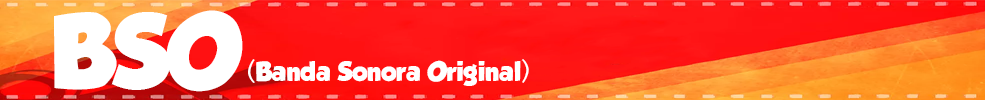
<style>
.page{position:relative;width:985px;height:100px}
.page>*{position:absolute;margin:0}
.t1{font:92px "GROBOLD";color:#ffffff}
.t2{font:24px "GROBOLD";color:#ffffff}
</style>
<div class="page">
<p class="t1" style="left:54px;top:10px;width:189px;height:82px">BSO</p>
<p class="t2" style="left:248px;top:59px;width:281px;height:27px">(Banda Sonora Original)</p>
</div>
